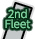
<style>
.page{position:relative;width:35px;height:39px;background:#ffffff}
.page>*{position:absolute;margin:0}
.t1{font:10px/10px "UDShinGoPro-Light";color:#83d6a2;font-weight:bold}
</style>
<div class="page">
<p class="t1" style="left:5px;top:9px;width:26px;height:20px;text-align:center">2nd<br>Fleet</p>
</div>
